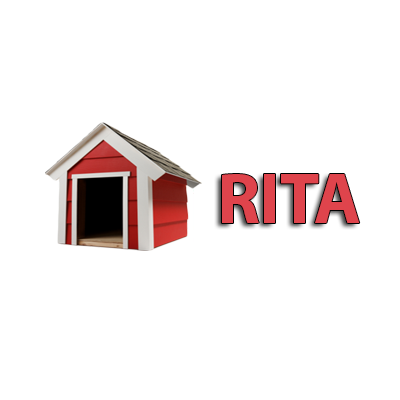
<style>
.page{position:relative;width:400px;height:400px;background:#ffffff}
.page>*{position:absolute;margin:0}
.t1{font:72px "MyriadPro-Bold";color:#df444c}
</style>
<div class="page">
<p class="t1" style="left:222px;top:174px;width:138px;height:49px">RITA</p>
</div>
